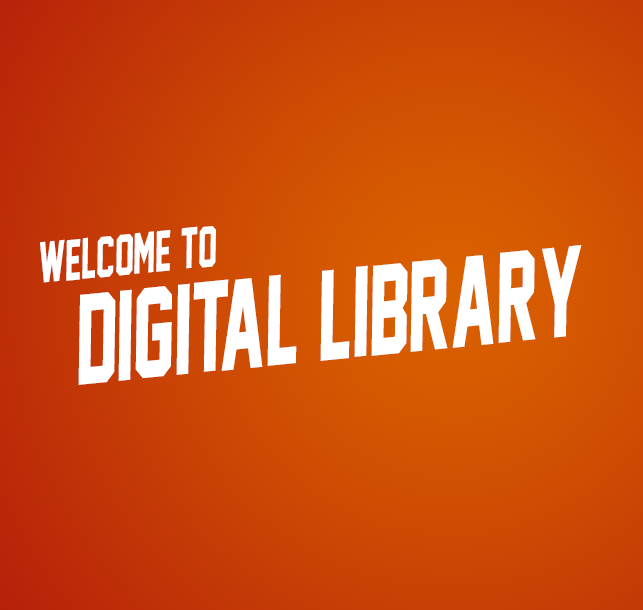
<style>
.page{position:relative;width:643px;height:610px}
.page>*{position:absolute;margin:0}
.t1{font:117px "JerseyM54";color:#ffffff;scale:0.69 1}
.t2{font:53px/63.9px "JerseyM54";color:#ffffff;scale:0.69 1}
</style>
<div class="page">
<p class="t1" style="left:40px;top:226px;width:542px;height:159px;rotate:-6deg"><span class="t2">WELCOME TO<br>  </span>DIGITAL LIBRARY</p>
</div>
